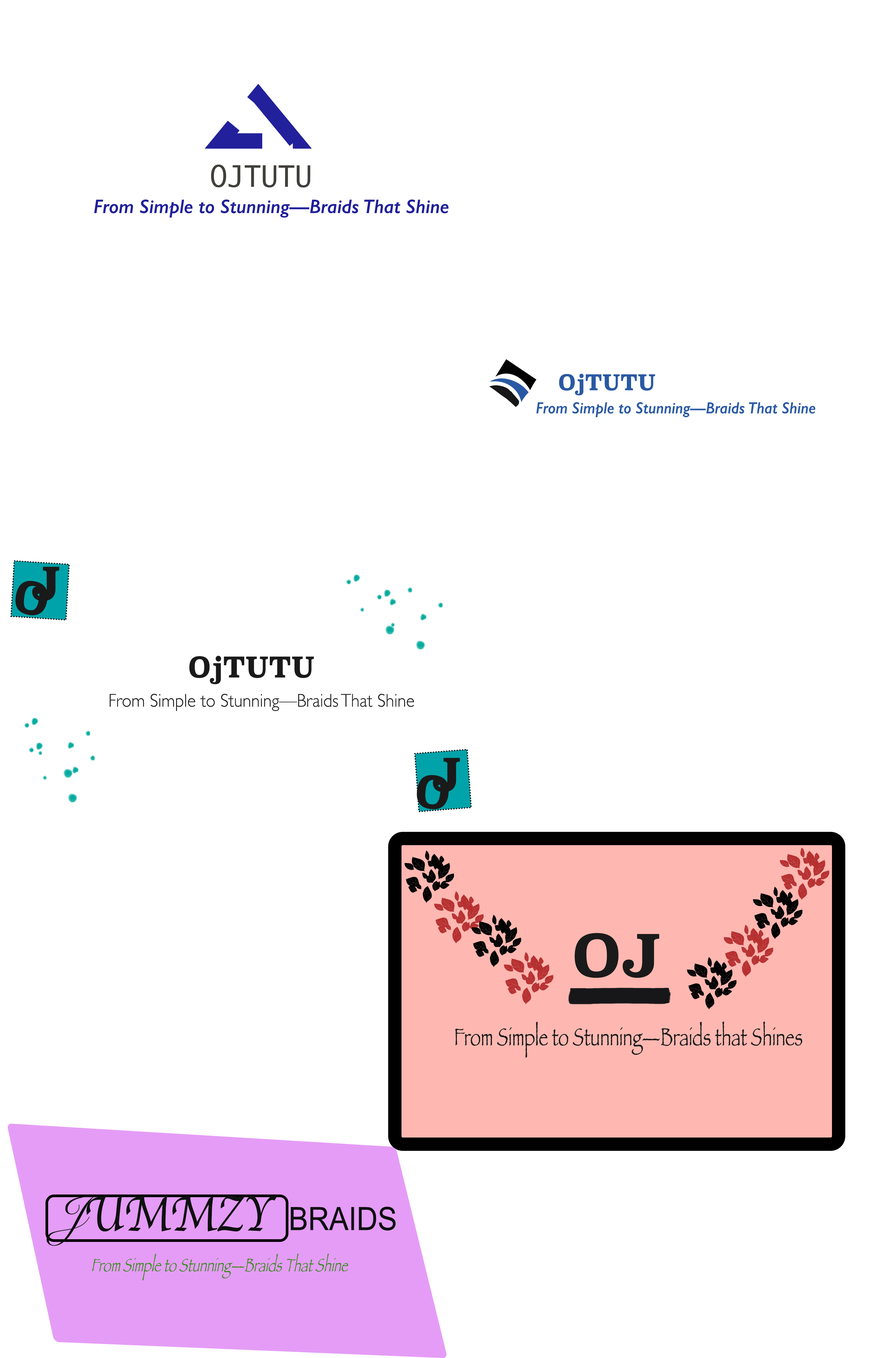
<style>
.page{position:relative;width:878px;height:1358px;background:#ffffff}
.page>*{position:absolute;margin:0}
.t1{font:21.4px "Superclarendon-Bold";color:#2959a4;scale:0.96 1}
.t2{font:45px "Superclarendon-Bold";color:#1a1a1a;scale:0.95 1}
.t3{font:43.8px "Superclarendon-Bold";color:#1a1a1a;scale:0.95 1}
.t4{font:28.1px "Superclarendon-Bold";color:#1a1a1a;scale:0.95 1}
.t5{font:18.6px "GillSans-Light";color:#1a1a1a;scale:0.95 1}
.t6{font:43.9px "Superclarendon-Bold";color:#1a1a1a;scale:0.95 1}
.t7{font:57.7px "Superclarendon-Bold";color:#1a1a1a}
.t8{font:25.3px "Papyrus-Condensed";color:#1a1a1a}
.t9{font:51.4px "Apple-Chancery";color:#0f1011;scale:0.91 1}
.t10{font:51.4px "SnellRoundhand";color:#0f1011;scale:0.91 1}
.t11{font:32.1px "ArialMT";color:#0f1011;scale:0.91 1}
.t12{font:19.2px "Papyrus-Condensed";color:#368c18}
</style>
<div class="page">
<p class="t1" style="left:559px;top:373px;width:97px;height:22px">OjTUTU</p>
<p class="t2" style="left:32px;top:566px;width:27px;height:35px">J</p>
<p class="t3" style="left:15px;top:581px;width:33px;height:34px;rotate:11deg">O</p>
<p class="t4" style="left:189px;top:655px;width:125px;height:29px">OjTUTU</p>
<p class="t5" style="left:110px;top:693px;width:304px;height:18px">From Simple to Stunning—Braids That Shine</p>
<p class="t2" style="left:433px;top:758px;width:27px;height:34px">J</p>
<p class="t6" style="left:417px;top:775px;width:32px;height:34px;rotate:7deg">O</p>
<p class="t7" style="left:575px;top:933px;width:85px;height:45px">OJ</p>
<p class="t8" style="left:455px;top:1021px;width:348px;height:36px">From Simple to Stunning—Braids that Shines</p>
<p class="t9" style="left:47px;top:1194px;width:230px;height:51px"><span class="t10">J</span>UMMZY</p>
<p class="t11" style="left:291px;top:1206px;width:105px;height:24px">BRAIDS</p>
<p class="t12" style="left:92px;top:1253px;width:256px;height:27px">From Simple to Stunning—Braids That Shine</p>
</div>
